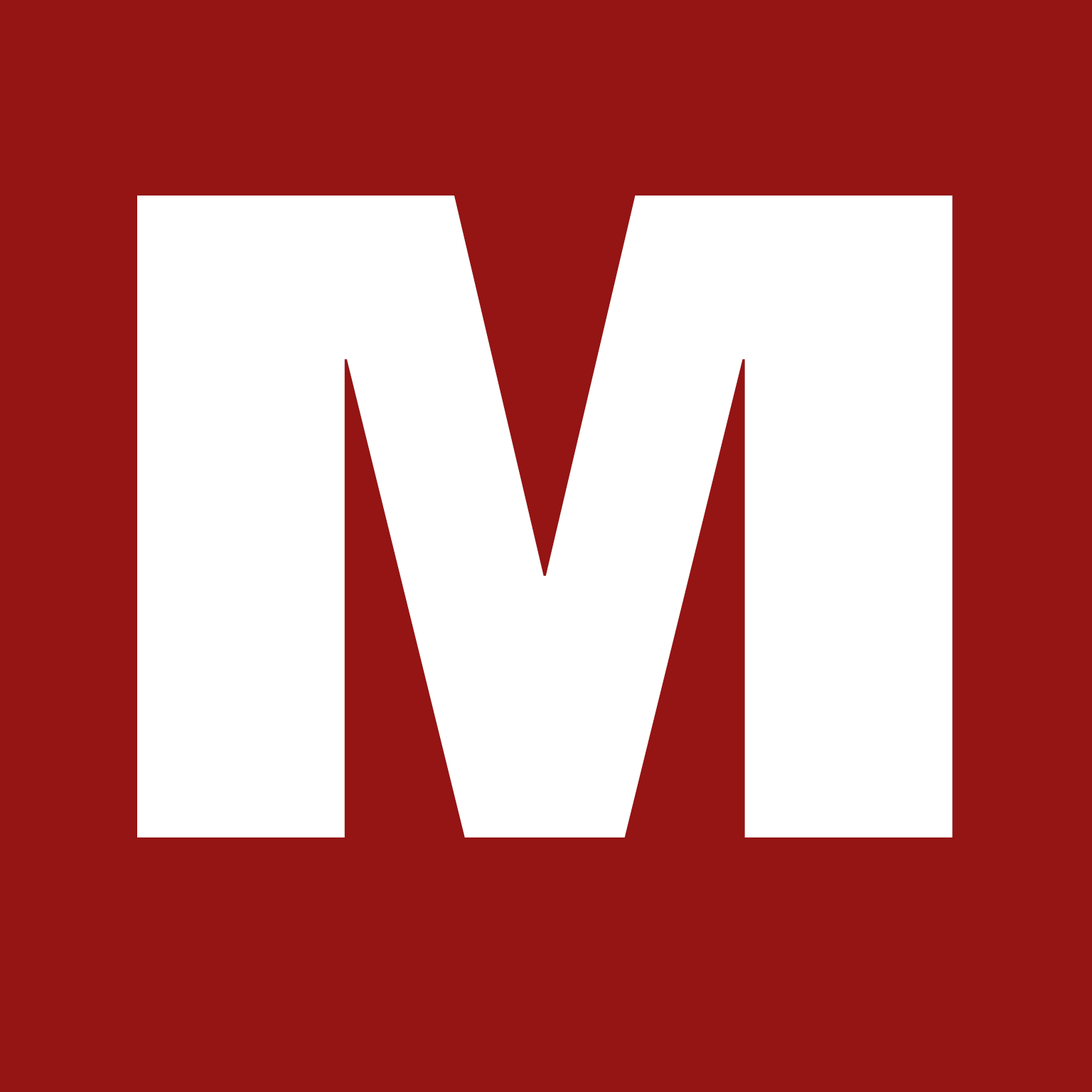
<style>
.page{position:relative;width:1092px;height:1092px;background:#951414}
.page>*{position:absolute;margin:0}
.t1{font:899.5px "HelveticaNeue-CondensedBlack";color:#ffffff;scale:1.32 1}
</style>
<div class="page">
<p class="t1" style="left:137px;top:196px;width:816px;height:641px">M</p>
</div>
